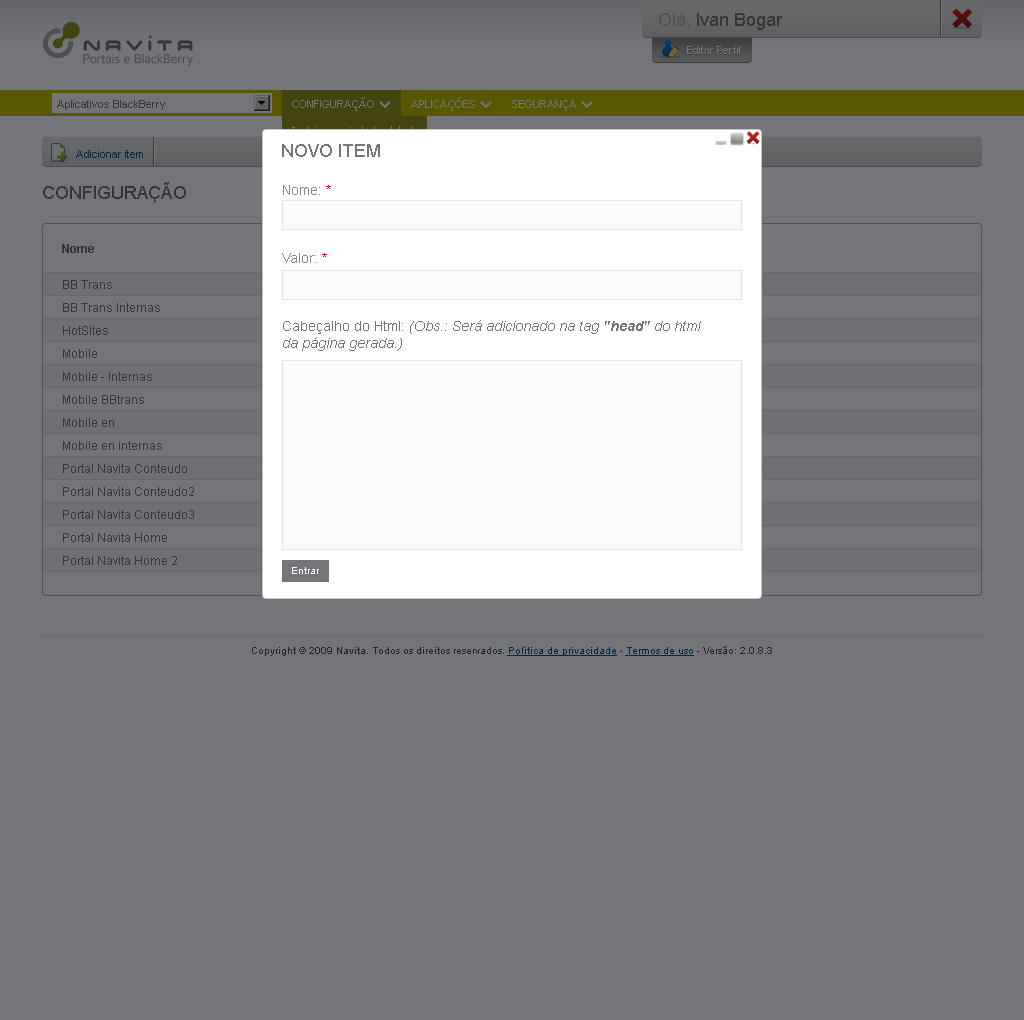
<style>
.page{position:relative;width:1024px;height:1020px;background:#747578}
.page>*{position:absolute;margin:0}
.t1{font:18px "ArialMT";color:#353638}
.t2{font:11px "ArialMT";color:#747578}
.t3{font:11px "ArialMT";color:#353638}
.t4{font:11px "ArialMT";color:#002744}
.t5{font:18px "ArialMT";color:#747578}
.t6{font:14px/17px "Arial-ItalicMT";color:#747578}
.t7{font:14px/17px "ArialMT";color:#888888}
.t8{font:14px/17px "ArialMT";color:#ff0000}
.t9{font:14px/17px "ArialMT";color:#747578}
.t10{font:14px/17px "Arial-BoldItalicMT";color:#747578}
.t11{font:12px/23px "ArialMT";color:#353638}
.t12{font:12px/23px "Arial-BoldMT";color:#353638}
.t13{font:10px "ArialMT";color:#ffffff}
.t14{font:10px "ArialMT"}
.t15{font:10px "ArialMT";text-decoration:underline}
</style>
<div class="page">
<p class="t1" style="left:659px;top:13px;width:123px;height:17px">Olá, Ivan Bogar</p>
<p class="t2" style="left:687px;top:46px;width:53px;height:8px">Editar Perfil</p>
<p class="t3" style="left:57px;top:100px;width:108px;height:10px">Aplicativos BlackBerry</p>
<p class="t2" style="left:292px;top:97px;width:82px;height:14px">CONFIGURAÇÃO</p>
<p class="t2" style="left:411px;top:97px;width:64px;height:14px">APLICAÇÕES</p>
<p class="t2" style="left:512px;top:100px;width:64px;height:11px">SEGURANÇA</p>
<p class="t4" style="left:76px;top:150px;width:67px;height:8px">Adicionar item</p>
<p class="t5" style="left:282px;top:144px;width:98px;height:13px">NOVO ITEM</p>
<p class="t1" style="left:43px;top:182px;width:143px;height:21px">CONFIGURAÇÃO</p>
<p class="t6" style="left:282px;top:185px;width:419px;height:166px"><span class="t7">Nome: </span><span class="t8">*<br></span><span class="t7"><br><br><br>Valor: </span><span class="t8">*<br><br><br></span><span class="t9"><br>Cabeçalho do Html: </span>(Obs.: Será adicionado na tag <span class="t10">"head" </span>do html da página gerada.)</p>
<p class="t11" style="left:62px;top:244px;width:132px;height:321px"><span class="t12">Nome<br><br></span>BB Trans<br>BB Trans Internas<br>HotSites<br>Mobile<br>Mobile - Internas<br>Mobile BBtrans<br>Mobile en<br>Mobile en internas<br>Portal Navita Conteudo<br>Portal Navita Conteudo2<br>Portal Navita Conteudo3<br>Portal Navita Home<br>Portal Navita Home 2</p>
<p class="t13" style="left:292px;top:567px;width:27px;height:7px">Entrar</p>
<p class="t14" style="left:252px;top:646px;width:520px;height:10px">Copyright © 2009 Navita. Todos os direitos reservados. <span class="t15">Política de privacidade</span> - <span class="t15">Termos de uso</span> - Versão: 2.0.8.3</p>
</div>
